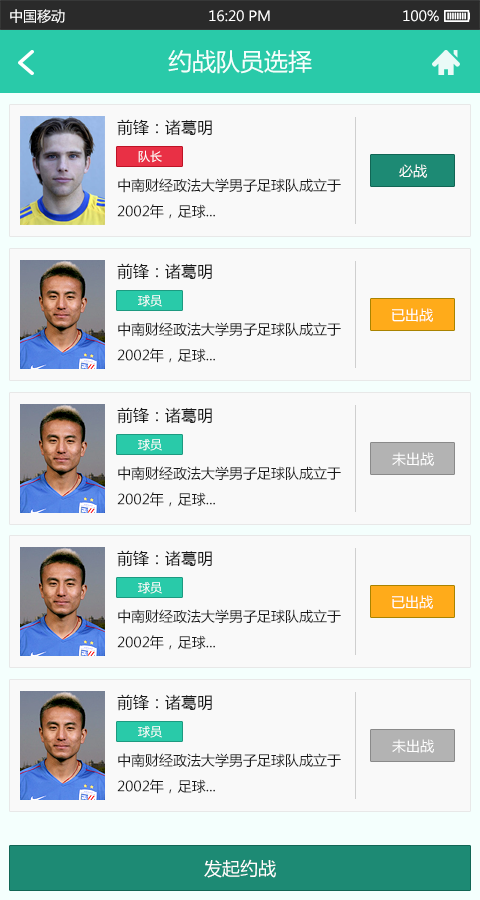
<style>
.page{position:relative;width:480px;height:900px;background:#f9f9f9}
.page>*{position:absolute;margin:0}
.t1{font:14px "MicrosoftYaHei";color:#ffffff}
.t2{font:24px "MicrosoftYaHei";color:#f4fffd}
.t3{font:16px "MicrosoftYaHei";color:#191919}
.t4{font:12px "MicrosoftYaHei";color:#ffffff}
.t5{font:14px/26px "MicrosoftYaHei";color:#191919}
.t6{font:18px "MicrosoftYaHei";color:#ffffff}
</style>
<div class="page">
<p class="t1" style="left:10px;top:9px;width:55px;height:14px">中国移动</p>
<p class="t1" style="left:209px;top:10px;width:61px;height:12px">16:20 PM</p>
<p class="t1" style="left:403px;top:10px;width:36px;height:12px">100%</p>
<p class="t2" style="left:168px;top:50px;width:144px;height:24px">约战队员选择</p>
<p class="t3" style="left:117px;top:119px;width:95px;height:17px">前锋：诸葛明</p>
<p class="t4" style="left:138px;top:150px;width:24px;height:13px">队长</p>
<p class="t1" style="left:399px;top:164px;width:28px;height:14px">必战</p>
<p class="t5" style="left:117px;top:178px;width:224px;height:41px">中南财经政法大学男子足球队成立于2002年，足球...</p>
<p class="t3" style="left:117px;top:263px;width:95px;height:17px">前锋：诸葛明</p>
<p class="t4" style="left:138px;top:295px;width:24px;height:12px">球员</p>
<p class="t1" style="left:392px;top:308px;width:41px;height:14px">已出战</p>
<p class="t5" style="left:117px;top:322px;width:224px;height:41px">中南财经政法大学男子足球队成立于2002年，足球...</p>
<p class="t3" style="left:117px;top:407px;width:95px;height:17px">前锋：诸葛明</p>
<p class="t4" style="left:138px;top:439px;width:24px;height:12px">球员</p>
<p class="t1" style="left:392px;top:452px;width:42px;height:14px">未出战</p>
<p class="t5" style="left:117px;top:466px;width:224px;height:41px">中南财经政法大学男子足球队成立于2002年，足球...</p>
<p class="t3" style="left:117px;top:550px;width:95px;height:17px">前锋：诸葛明</p>
<p class="t4" style="left:138px;top:582px;width:24px;height:12px">球员</p>
<p class="t1" style="left:392px;top:595px;width:41px;height:14px">已出战</p>
<p class="t5" style="left:117px;top:609px;width:224px;height:41px">中南财经政法大学男子足球队成立于2002年，足球...</p>
<p class="t3" style="left:117px;top:694px;width:95px;height:17px">前锋：诸葛明</p>
<p class="t4" style="left:138px;top:726px;width:24px;height:12px">球员</p>
<p class="t1" style="left:392px;top:739px;width:42px;height:14px">未出战</p>
<p class="t5" style="left:117px;top:753px;width:224px;height:41px">中南财经政法大学男子足球队成立于2002年，足球...</p>
<p class="t6" style="left:204px;top:859px;width:72px;height:19px">发起约战</p>
</div>
